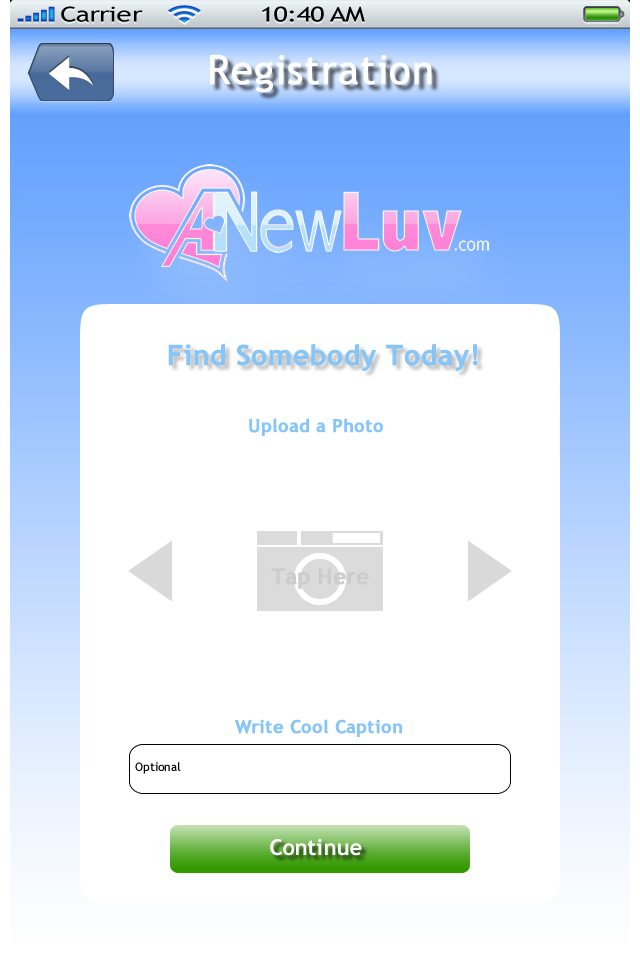
<style>
.page{position:relative;width:640px;height:960px;background:#ffffff}
.page>*{position:absolute;margin:0}
.t1{font:40px "TrebuchetMS";color:#ffffff;font-weight:bold}
.t2{font:28px "TrebuchetMS-Bold";color:#85c5f8;font-weight:bold}
.t3{font:18px "TrebuchetMS-Bold";color:#85c5f8;font-weight:bold}
.t4{font:22px "TrebuchetMS-Bold";color:#ffffff}
</style>
<div class="page">
<p class="t1" style="left:210px;top:54px;width:222px;height:39px">Registration</p>
<p class="t2" style="left:168px;top:343px;width:310px;height:28px">Find Somebody Today!</p>
<p class="t3" style="left:249px;top:418px;width:134px;height:18px">Upload a Photo</p>
<p class="t3" style="left:235px;top:719px;width:167px;height:18px">Write Cool Caption</p>
<p class="t4" style="left:270px;top:839px;width:92px;height:17px">Continue</p>
</div>
